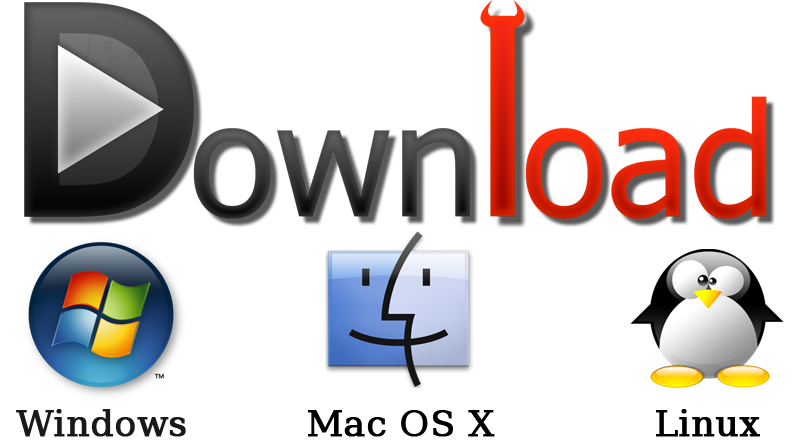
<style>
.page{position:relative;width:800px;height:440px;background:#ffffff}
.page>*{position:absolute;margin:0}
.t1{font:36px "BitstreamVeraSerif-Roman";color:#191919;font-weight:bold}
.t2{font:36px "BitstreamVeraSerif-Roman";color:#000000;font-weight:bold}
</style>
<div class="page">
<p class="t1" style="left:16px;top:409px;width:170px;height:28px">Windows</p>
<p class="t2" style="left:308px;top:410px;width:187px;height:27px">Mac OS X</p>
<p class="t2" style="left:656px;top:409px;width:104px;height:28px">Linux</p>
</div>
